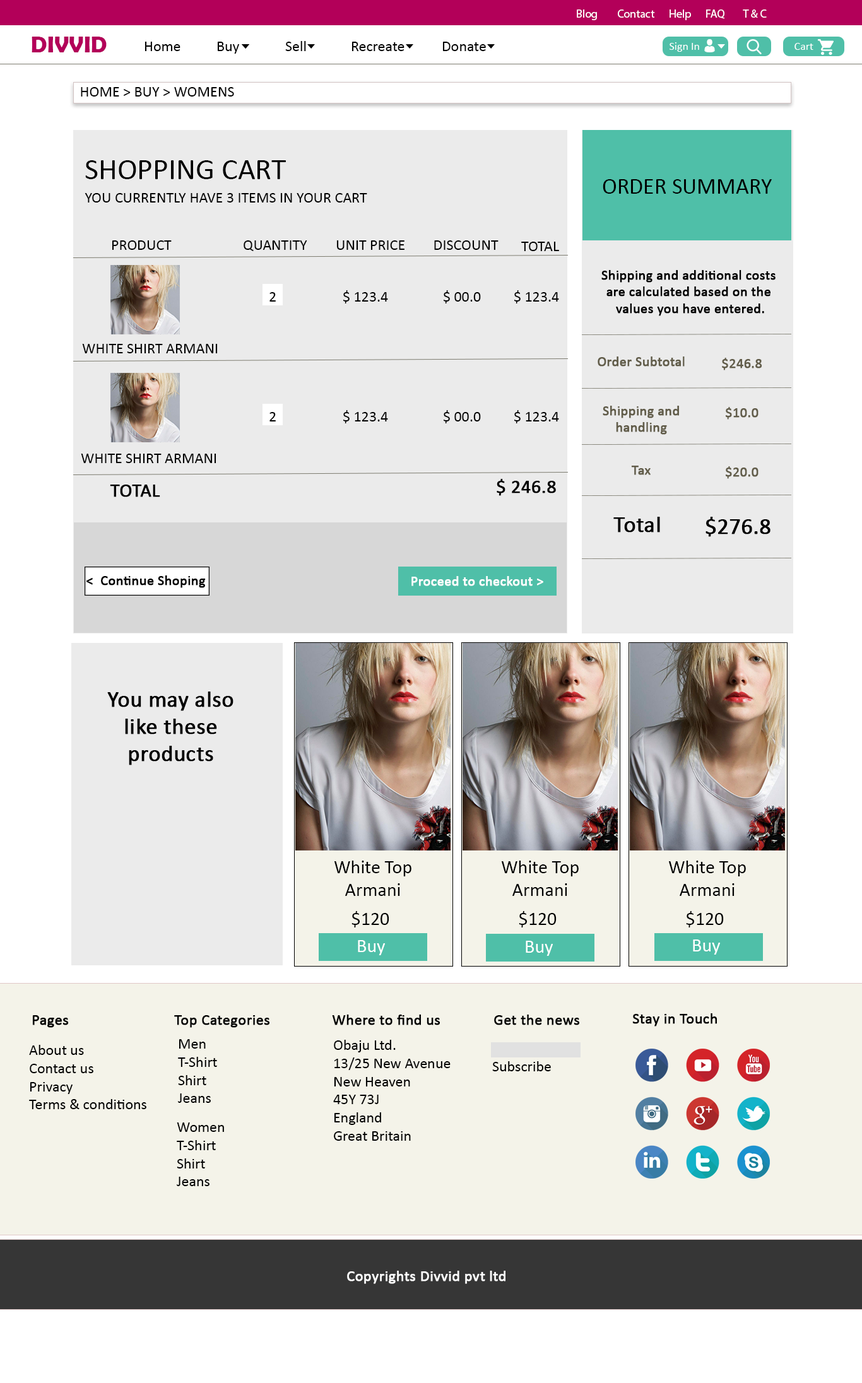
<style>
.page{position:relative;width:862px;height:1383px;background:#ffffff}
.page>*{position:absolute;margin:0}
.t1{font:11.4px "MyriadPro-Regular";color:#ffffff}
.t2{font:22.7px "BerlinSansFBDemi-Bold";color:#b30059}
.t3{font:15.1px "Calibri";color:#000000}
.t4{font:11.4px "Calibri";color:#ffffff}
.t5{font:15.1px "Calibri";color:#000000;text-transform:uppercase}
.t6{font:30.3px "Calibri";color:#000000;text-transform:uppercase}
.t7{font:22.7px "Calibri";color:#000000;text-transform:uppercase}
.t8{font:13.9px "Calibri";color:#000000;font-weight:bold}
.t9{font:13.9px "Calibri";color:#625d4a;font-weight:bold}
.t10{font:18.9px "Calibri";color:#000000;text-transform:uppercase;font-weight:bold}
.t11{font:22.7px "Calibri";color:#000000;font-weight:bold}
.t12{font:13.9px "Calibri";color:#ffffff;font-weight:bold}
.t13{font:18.9px "Calibri";color:#000000}
.t14{font:18.9px "Calibri";color:#ffffff}
.t15{font:15.1px "Calibri";color:#000000;font-weight:bold}
.t16{font:15.1px "Calibri";color:#ffffff;font-weight:bold}
</style>
<div class="page">
<p class="t1" style="left:577px;top:9px;width:20px;height:11px">Blog</p>
<p class="t1" style="left:618px;top:9px;width:37px;height:9px">Contact</p>
<p class="t1" style="left:670px;top:9px;width:21px;height:11px">Help</p>
<p class="t1" style="left:706px;top:9px;width:18px;height:10px">FAQ</p>
<p class="t1" style="left:743px;top:9px;width:24px;height:9px">T &amp; C</p>
<p class="t2" style="left:32px;top:37px;width:75px;height:15px">DIVVID</p>
<p class="t3" style="left:145px;top:42px;width:35px;height:9px">Home</p>
<p class="t3" style="left:217px;top:42px;width:22px;height:12px">Buy</p>
<p class="t3" style="left:285px;top:41px;width:21px;height:10px">Sell</p>
<p class="t3" style="left:352px;top:42px;width:53px;height:9px">Recreate</p>
<p class="t3" style="left:442px;top:42px;width:44px;height:9px">Donate</p>
<p class="t4" style="left:670px;top:42px;width:29px;height:10px">Sign In</p>
<p class="t4" style="left:795px;top:43px;width:18px;height:7px">Cart</p>
<p class="t5" style="left:81px;top:87px;width:153px;height:10px">Home &gt; Buy &gt; Womens</p>
<p class="t6" style="left:85px;top:160px;width:201px;height:19px">Shopping Cart</p>
<p class="t7" style="left:603px;top:179px;width:169px;height:15px">Order summary</p>
<p class="t5" style="left:85px;top:193px;width:282px;height:10px">You Currently have 3 items in your cart</p>
<p class="t5" style="left:112px;top:240px;width:60px;height:10px">Product</p>
<p class="t5" style="left:244px;top:240px;width:63px;height:11px">Quantity</p>
<p class="t5" style="left:336px;top:240px;width:69px;height:10px">Unit Price</p>
<p class="t5" style="left:434px;top:240px;width:65px;height:10px">Discount</p>
<p class="t5" style="left:521px;top:242px;width:38px;height:9px">Total</p>
<p class="t8" style="left:601px;top:270px;width:175px;height:46px;text-align:center">Shipping and additional costs <br>are calculated based on the <br>values you have entered.</p>
<p class="t5" style="left:269px;top:292px;width:7px;height:10px">2</p>
<p class="t5" style="left:343px;top:290px;width:45px;height:14px">$ 123.4</p>
<p class="t5" style="left:444px;top:290px;width:37px;height:14px">$ 00.0</p>
<p class="t5" style="left:514px;top:290px;width:45px;height:14px">$ 123.4</p>
<p class="t5" style="left:82px;top:344px;width:136px;height:9px">White Shirt Armani</p>
<p class="t9" style="left:598px;top:357px;width:87px;height:10px">Order Subtotal</p>
<p class="t9" style="left:722px;top:358px;width:40px;height:12px">$246.8</p>
<p class="t5" style="left:269px;top:412px;width:7px;height:10px">2</p>
<p class="t5" style="left:343px;top:410px;width:45px;height:13px">$ 123.4</p>
<p class="t5" style="left:444px;top:410px;width:37px;height:13px">$ 00.0</p>
<p class="t5" style="left:514px;top:410px;width:45px;height:13px">$ 123.4</p>
<p class="t9" style="left:603px;top:406px;width:76px;height:29px;text-align:center">Shipping and<br>handling</p>
<p class="t9" style="left:726px;top:407px;width:33px;height:13px">$10.0</p>
<p class="t5" style="left:81px;top:454px;width:135px;height:9px">White Shirt Armani</p>
<p class="t9" style="left:631px;top:466px;width:20px;height:9px">Tax</p>
<p class="t9" style="left:726px;top:466px;width:33px;height:13px">$20.0</p>
<p class="t10" style="left:110px;top:485px;width:50px;height:12px">Total</p>
<p class="t10" style="left:497px;top:479px;width:59px;height:17px">$ 246.8</p>
<p class="t11" style="left:613px;top:517px;width:47px;height:16px">Total</p>
<p class="t11" style="left:706px;top:517px;width:65px;height:20px">$276.8</p>
<p class="t8" style="left:86px;top:576px;width:120px;height:12px">&lt;  Continue Shoping</p>
<p class="t12" style="left:411px;top:576px;width:132px;height:10px">Proceed to checkout &gt;</p>
<p class="t11" style="left:107px;top:692px;width:126px;height:73px;text-align:center">You may also like these products</p>
<p class="t13" style="left:334px;top:861px;width:77px;height:35px;text-align:center">White Top<br>Armani</p>
<p class="t13" style="left:502px;top:861px;width:77px;height:35px;text-align:center">White Top<br>Armani</p>
<p class="t13" style="left:669px;top:861px;width:77px;height:35px;text-align:center">White Top<br>Armani</p>
<p class="t13" style="left:352px;top:911px;width:37px;height:17px">$120</p>
<p class="t13" style="left:519px;top:911px;width:38px;height:17px">$120</p>
<p class="t13" style="left:686px;top:911px;width:38px;height:17px">$120</p>
<p class="t14" style="left:358px;top:940px;width:27px;height:15px">Buy</p>
<p class="t14" style="left:526px;top:941px;width:27px;height:15px">Buy</p>
<p class="t14" style="left:693px;top:940px;width:27px;height:15px">Buy</p>
<p class="t15" style="left:632px;top:1013px;width:85px;height:14px">Stay in Touch</p>
<p class="t15" style="left:32px;top:1015px;width:37px;height:13px">Pages</p>
<p class="t15" style="left:174px;top:1015px;width:95px;height:13px">Top Categories</p>
<p class="t15" style="left:332px;top:1015px;width:108px;height:10px">Where to find us</p>
<p class="t15" style="left:494px;top:1015px;width:85px;height:10px">Get the news</p>
<p class="t3" style="left:29px;top:1045px;width:117px;height:64px">About us<br>Contact us<br>Privacy<br>Terms &amp; conditions</p>
<p class="t3" style="left:178px;top:1039px;width:39px;height:64px">Men<br>T-Shirt<br>Shirt<br>Jeans</p>
<p class="t3" style="left:333px;top:1040px;width:118px;height:101px">Obaju Ltd. <br>13/25 New Avenue <br>New Heaven <br>45Y 73J <br>England <br>Great Britain</p>
<p class="t3" style="left:492px;top:1061px;width:59px;height:11px">Subscribe</p>
<p class="t3" style="left:177px;top:1123px;width:47px;height:63px">Women<br>T-Shirt<br>Shirt<br>Jeans</p>
<p class="t16" style="left:347px;top:1271px;width:158px;height:13px">Copyrights Divvid pvt ltd</p>
</div>
